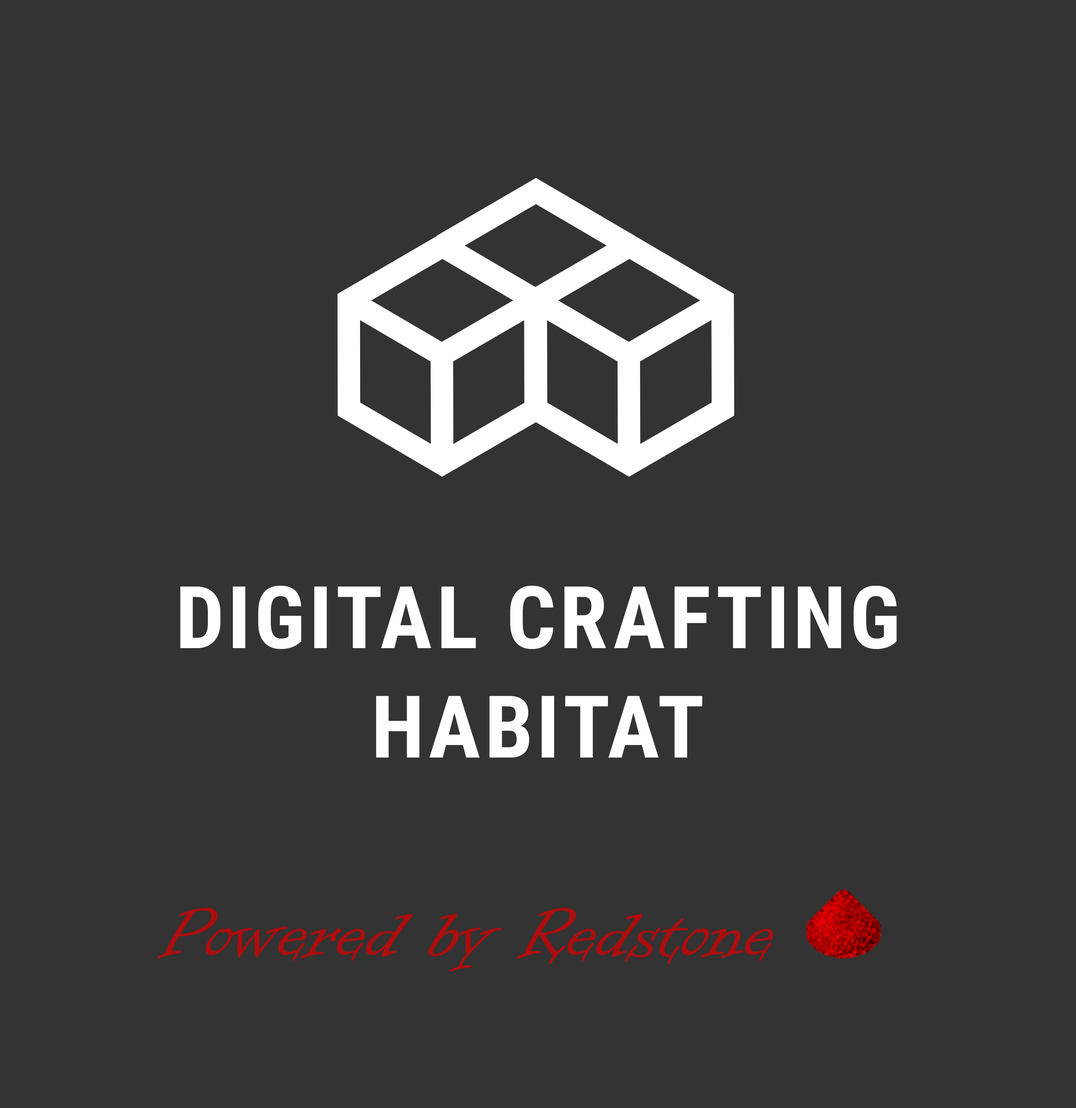
<style>
.page{position:relative;width:1076px;height:1108px;background:#333333}
.page>*{position:absolute;margin:0}
.t1{font:86.6px/109.4px "RobotoCondensed-Bold";letter-spacing:0.05em;color:#ffffff;text-transform:uppercase}
.t2{font:82.1px "InformalRoman-Regular";color:#ae0d0d}
</style>
<div class="page">
<p class="t1" style="left:180px;top:586px;width:717px;height:172px;text-align:center">Digital Crafting<br>Habitat</p>
<p class="t2" style="left:157px;top:908px;width:616px;height:64px">Powered by Redstone</p>
</div>
